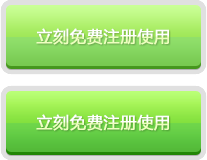
<style>
.page{position:relative;width:207px;height:160px}
.page>*{position:absolute;margin:0}
.t1{font:16px "MicrosoftYaHei";letter-spacing:0.025em;font-weight:bold}
</style>
<div class="page">
<p class="t1" style="left:36px;top:28px;width:133px;height:17px">立刻免费注册使用</p>
<p class="t1" style="left:36px;top:114px;width:133px;height:17px">立刻免费注册使用</p>
</div>
